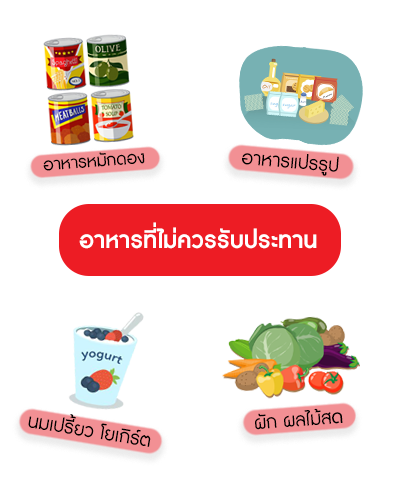
<style>
.page{position:relative;width:400px;height:500px;background:#ffffff}
.page>*{position:absolute;margin:0}
.t1{font:21.7px "DBAdmanX";color:#000000}
.t2{font:24px "DBAdmanX";color:#000000}
.t3{font:30px "DBAdmanX-Bold";color:#ffffff}
</style>
<div class="page">
<p class="t1" style="left:43px;top:152px;width:102px;height:19px;rotate:-4deg">อาหารหมักดอง</p>
<p class="t2" style="left:242px;top:153px;width:97px;height:23px;rotate:5deg">อาหารแปรรูป</p>
<p class="t3" style="left:79px;top:222px;width:238px;height:27px">อาหารที่ไม่ควรรับประทาน</p>
<p class="t2" style="left:28px;top:414px;width:123px;height:33px;rotate:9deg">นมเปรี้ยว โยเกิร์ต</p>
<p class="t2" style="left:255px;top:408px;width:88px;height:22px;rotate:-4deg">ผัก ผลไม้สด</p>
</div>
